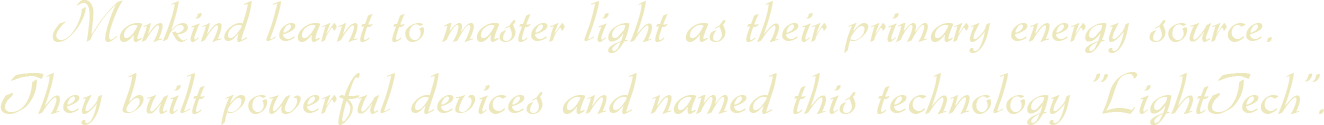
<style>
.page{position:relative;width:1324px;height:125px;background:#ffffff}
.page>*{position:absolute;margin:0}
.t1{font:60px "Gabrielle";color:#ede8bb}
</style>
<div class="page">
<p class="t1" style="left:0px;top:0px;width:1324px;height:125px;text-align:center">Mankind learnt to master light as their primary energy source.<br>They built powerful devices and named this technology "LightTech".</p>
</div>
